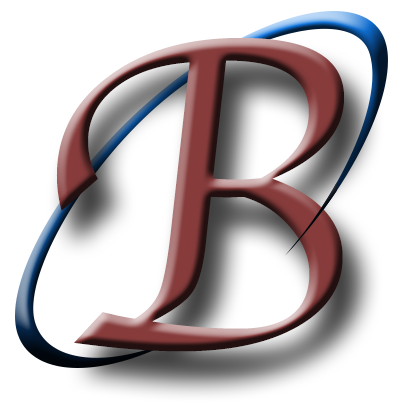
<style>
.page{position:relative;width:403px;height:403px;background:#ffffff}
.page>*{position:absolute;margin:0}
.t1{font:458.3px "Apple-Chancery"}
</style>
<div class="page">
<p class="t1" style="left:56px;top:38px;width:288px;height:314px">B</p>
</div>
